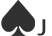
<style>
.page{position:relative;width:52px;height:36px;background:#ffffff}
.page>*{position:absolute;margin:0}
.t1{font:23.4px "MyriadPro-Regular";letter-spacing:-0.1em;color:#303030;font-weight:bold}
</style>
<div class="page">
<p class="t1" style="left:37px;top:19px;width:9px;height:17px">J</p>
</div>
